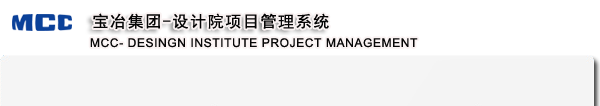
<style>
.page{position:relative;width:600px;height:106px;background:#ffffff}
.page>*{position:absolute;margin:0}
.t1{font:16px "SimHei";letter-spacing:0.1em;color:#050505}
.t2{font:12px "ArialMT";letter-spacing:0.05em;color:#050505}
</style>
<div class="page">
<p class="t1" style="left:93px;top:13px;width:236px;height:16px">宝冶集团-设计院项目管理系统</p>
<p class="t2" style="left:90px;top:38px;width:328px;height:10px">MCC- DESINGN INSTITUTE PROJECT MANAGEMENT</p>
</div>
